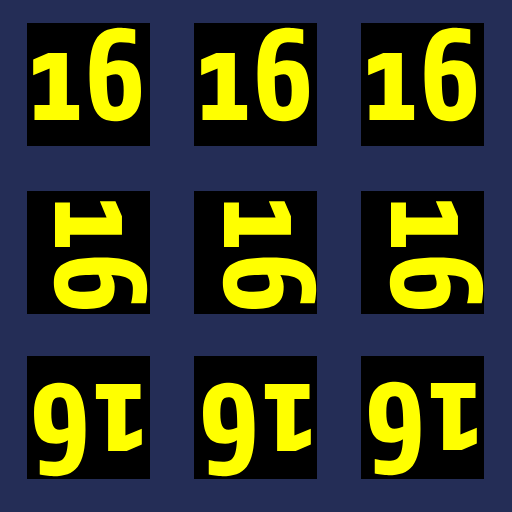
<style>
.page{position:relative;width:512px;height:512px;background:#242d56}
.page>*{position:absolute;margin:0}
.t1{font:130px "Share-BoldOSF";color:#ffff00}
</style>
<div class="page">
<p class="t1" style="left:33px;top:27px;width:108px;height:95px">16</p>
<p class="t1" style="left:201px;top:27px;width:108px;height:95px">16</p>
<p class="t1" style="left:368px;top:27px;width:108px;height:95px">16</p>
<p class="t1" style="left:53px;top:201px;width:95px;height:108px;rotate:90deg">16</p>
<p class="t1" style="left:222px;top:201px;width:95px;height:108px;rotate:90deg">16</p>
<p class="t1" style="left:389px;top:201px;width:95px;height:108px;rotate:90deg">16</p>
<p class="t1" style="left:34px;top:382px;width:108px;height:95px;rotate:-180deg">16</p>
<p class="t1" style="left:203px;top:382px;width:108px;height:95px;rotate:-180deg">16</p>
<p class="t1" style="left:369px;top:381px;width:108px;height:95px;rotate:-180deg">16</p>
</div>
